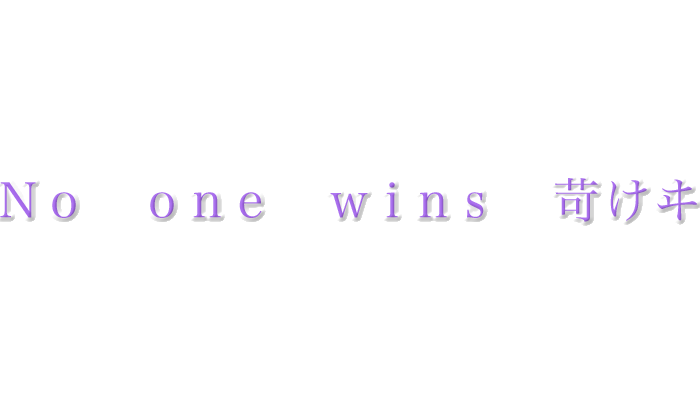
<style>
.page{position:relative;width:700px;height:400px;background:#ffffff}
.page>*{position:absolute;margin:0}
.t1{font:48px "HiraMinProN-W3";letter-spacing:0.12em;color:#a56aea}
</style>
<div class="page">
<p class="t1" style="left:0px;top:178px;width:697px;height:44px">Ｎｏ　ｏｎｅ　ｗｉｎｓ　苛けヰ</p>
</div>
